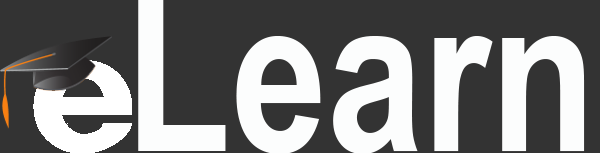
<style>
.page{position:relative;width:600px;height:153px;background:#333333}
.page>*{position:absolute;margin:0}
.t1{font:216px "Arial-BoldMT";color:#fcfdfd;scale:0.8 1}
</style>
<div class="page">
<p class="t1" style="left:138px;top:0px;width:447px;height:154px">Learn</p>
</div>
